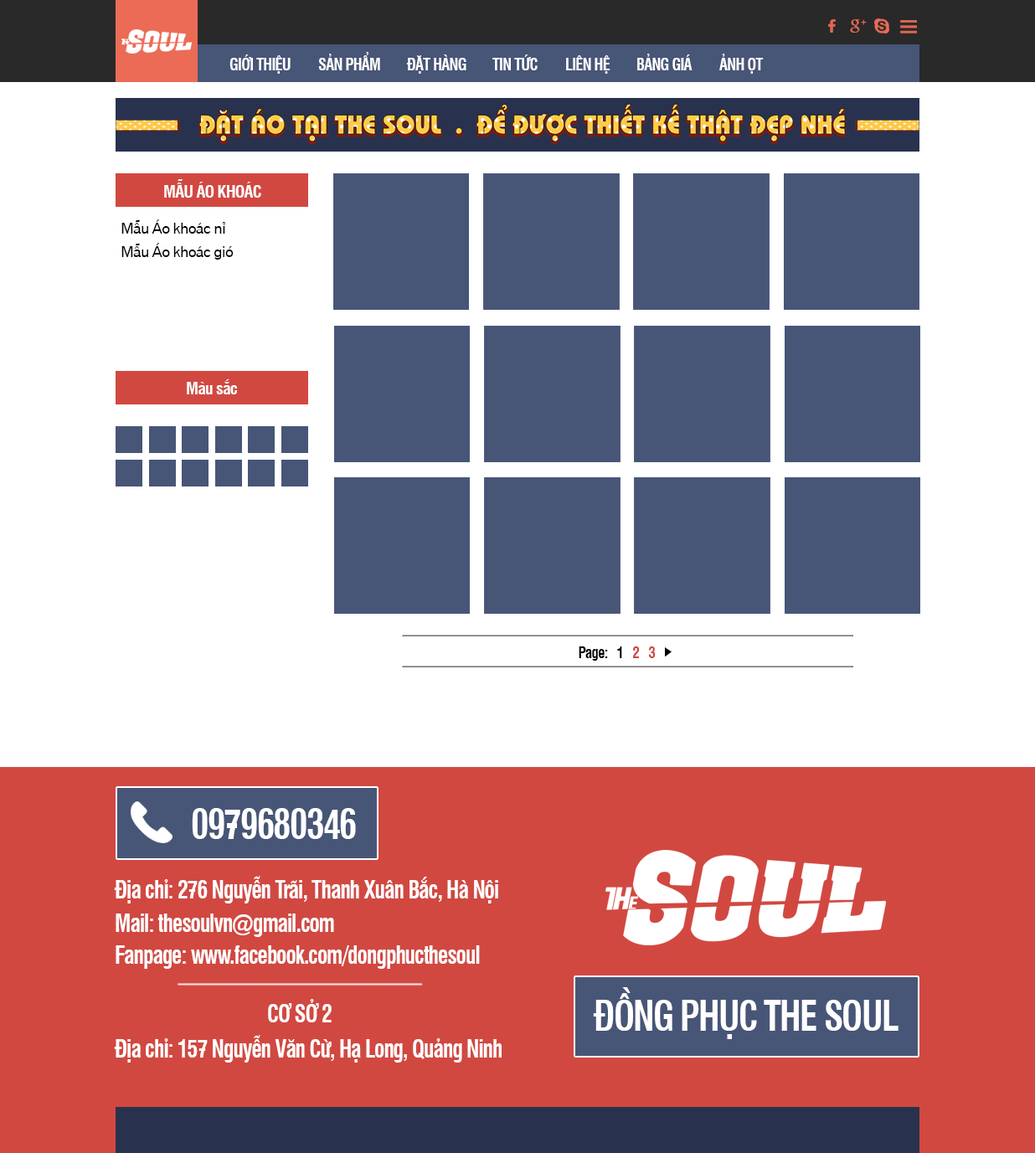
<style>
.page{position:relative;width:1035px;height:1153px;background:#ffffff}
.page>*{position:absolute;margin:0}
.t1{font:16.5px "UVNHongHaHepBold";letter-spacing:-0.04em;color:#ffffff;scale:0.92 1}
.t2{font:16.8px "UVNHongHaHepBold";letter-spacing:-0.04em;color:#ffffff}
.t3{font:15.1px "UVNGioMay";letter-spacing:-0.04em;color:#000000}
.t4{font:15.2px "UVNHongHaHepBold";letter-spacing:-0.04em;color:#000000;scale:0.95 1}
.t5{font:15.2px "UVNHongHaHepBold";letter-spacing:-0.04em;color:#d14841;scale:0.95 1}
.t6{font:39.8px "UVNHongHaHepBold";letter-spacing:-0.04em;color:#ffffff;scale:0.9 1}
.t7{font:24.1px "UVNHongHaHepBold";letter-spacing:-0.04em;color:#ffffff;scale:0.89 1}
</style>
<div class="page">
<p class="t1" style="left:318px;top:52px;width:62px;height:18px">SẢN PHẨM</p>
<p class="t1" style="left:637px;top:54px;width:55px;height:16px">BẢNG GIÁ</p>
<p class="t1" style="left:719px;top:54px;width:44px;height:20px">ẢNH ỌT</p>
<p class="t1" style="left:229px;top:54px;width:61px;height:20px">GIỚI THIỆU</p>
<p class="t1" style="left:406px;top:54px;width:60px;height:20px">ĐẶT HÀNG</p>
<p class="t1" style="left:492px;top:54px;width:45px;height:16px">TIN TỨC</p>
<p class="t1" style="left:566px;top:55px;width:44px;height:19px">LIÊN HỆ</p>
<p class="t2" style="left:164px;top:179px;width:97px;height:19px">MẪU ÁO KHOÁC</p>
<p class="t3" style="left:121px;top:219px;width:104px;height:15px">Mẫu Áo khoác nỉ</p>
<p class="t3" style="left:121px;top:243px;width:113px;height:16px">Mẫu Áo khoác gió</p>
<p class="t2" style="left:187px;top:379px;width:50px;height:15px">Màu sắc</p>
<p class="t4" style="left:578px;top:646px;width:77px;height:14px">Page:   1   <span class="t5">2   3</span></p>
<p class="t6" style="left:192px;top:808px;width:164px;height:31px">0979680346</p>
<p class="t7" style="left:114px;top:876px;width:384px;height:27px">Địa chỉ: 276 Nguyễn Trãi, Thanh Xuân Bắc, Hà Nội</p>
<p class="t7" style="left:116px;top:913px;width:218px;height:24px">Mail: thesoulvn@gmail.com</p>
<p class="t7" style="left:116px;top:945px;width:364px;height:23px">Fanpage: www.facebook.com/dongphucthesoul</p>
<p class="t6" style="left:593px;top:987px;width:305px;height:52px">ĐỒNG PHỤC THE SOUL</p>
<p class="t7" style="left:268px;top:999px;width:63px;height:23px">CƠ SỞ 2</p>
<p class="t7" style="left:114px;top:1035px;width:387px;height:27px">Địa chỉ: 157 Nguyễn Văn Cừ, Hạ Long, Quảng Ninh</p>
</div>
